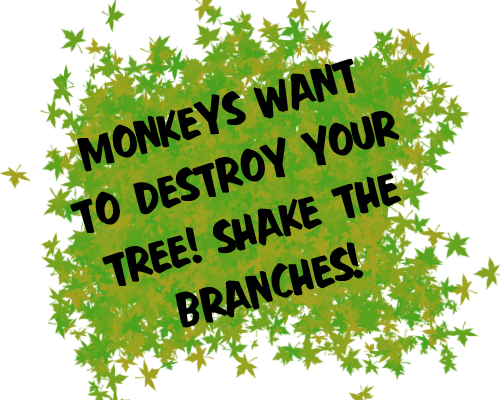
<style>
.page{position:relative;width:500px;height:400px;background:#ffffff}
.page>*{position:absolute;margin:0}
.t1{font:50px "FastAction";color:#000000}
</style>
<div class="page">
<p class="t1" style="left:70px;top:58px;width:332px;height:270px;text-align:center;rotate:-17deg">MONKEYS WANT<br>TO DESTROY YOUR<br>TREE! SHAKE THE<br>BRANCHES!</p>
</div>
